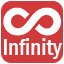
<style>
.page{position:relative;width:64px;height:64px;background:#d13a3a}
.page>*{position:absolute;margin:0}
.t1{font:23.8px "FranklinGothic-MediumCond";color:#ffffff}
</style>
<div class="page">
<p class="t1" style="left:4px;top:38px;width:58px;height:21px">Infinity</p>
</div>
